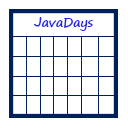
<style>
.page{position:relative;width:128px;height:128px;background:#ffffff}
.page>*{position:absolute;margin:0}
.t1{font:12.5px "SegoePrint-Bold";color:#2722e6}
</style>
<div class="page">
<p class="t1" style="left:34px;top:17px;width:59px;height:14px">JavaDays</p>
</div>
